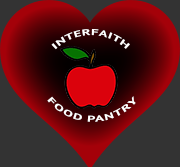
<style>
.page{position:relative;width:180px;height:167px;background:#333333}
.page>*{position:absolute;margin:0}
.t1{font:8.5px "PTSans-Bold";letter-spacing:0.05em;color:#ffffff;text-transform:uppercase;scale:1.4 1}
</style>
<div class="page">
<p class="t1" style="left:51px;top:28px;width:79px;height:22px">Interfaith</p>
<p class="t1" style="left:47px;top:96px;width:89px;height:26px">Food Pantry</p>
</div>
